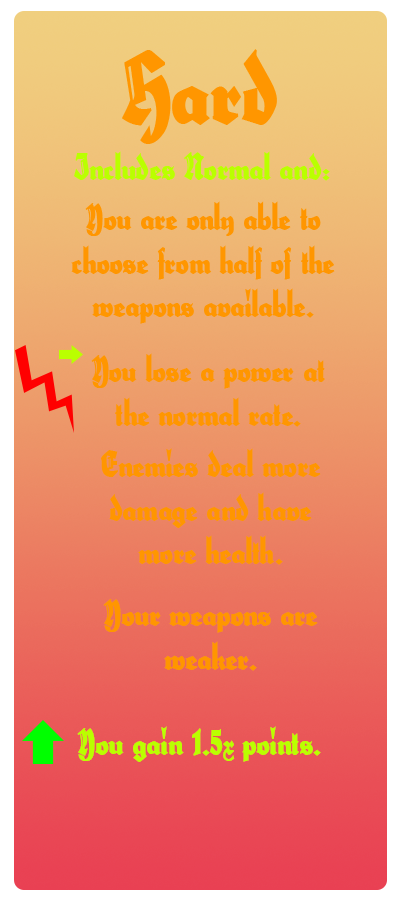
<style>
.page{position:relative;width:400px;height:900px}
.page>*{position:absolute;margin:0}
.t1{font:100px "HerzogVonGraf";color:#ff9600}
.t2{font:36px "HerzogVonGraf";color:#baff00}
.t3{font:36px "HerzogVonGraf";color:#ff9600}
</style>
<div class="page">
<p class="t1" style="left:122px;top:49px;width:155px;height:95px">Hard</p>
<p class="t2" style="left:74px;top:151px;width:256px;height:30px">Includes Normal and:</p>
<p class="t3" style="left:71px;top:201px;width:264px;height:123px;text-align:center">You are only able to choose from half of the weapons available.</p>
<p class="t3" style="left:91px;top:353px;width:234px;height:74px;text-align:center">You lose a power at the normal rate.</p>
<p class="t3" style="left:101px;top:448px;width:220px;height:117px;text-align:center">Enemies deal more damage and have more health.</p>
<p class="t3" style="left:103px;top:599px;width:215px;height:72px;text-align:center">Your weapons are weaker.</p>
<p class="t2" style="left:77px;top:726px;width:244px;height:36px">You gain 1.5x points.</p>
</div>
